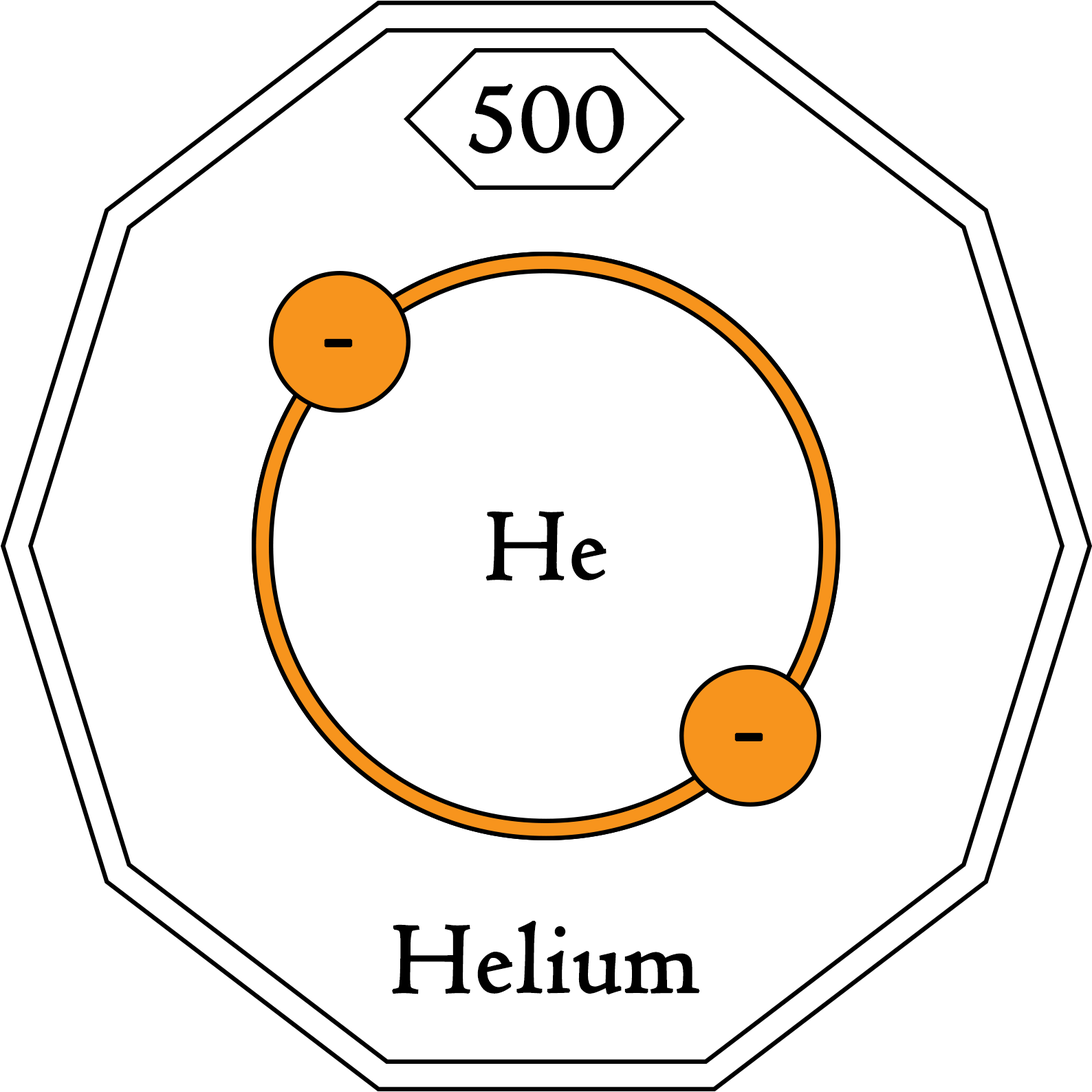
<style>
.page{position:relative;width:1092px;height:1092px;background:#ffffff}
.page>*{position:absolute;margin:0}
.t1{font:103.1px "Centaur";letter-spacing:0.01em;color:#000000;font-weight:bold}
.t2{font:103.1px "Centaur";letter-spacing:0.01em;color:#000000;text-transform:uppercase;font-weight:bold}
</style>
<div class="page">
<p class="t1" style="left:468px;top:84px;width:156px;height:70px">500</p>
<p class="t1" style="left:324px;top:338px;width:29px;height:9px">-</p>
<p class="t2" style="left:485px;top:511px;width:122px;height:70px">H<span class="t1">e</span></p>
<p class="t1" style="left:734px;top:732px;width:29px;height:9px">-</p>
<p class="t1" style="left:392px;top:921px;width:308px;height:74px"><span class="t2">H</span>elium</p>
</div>
